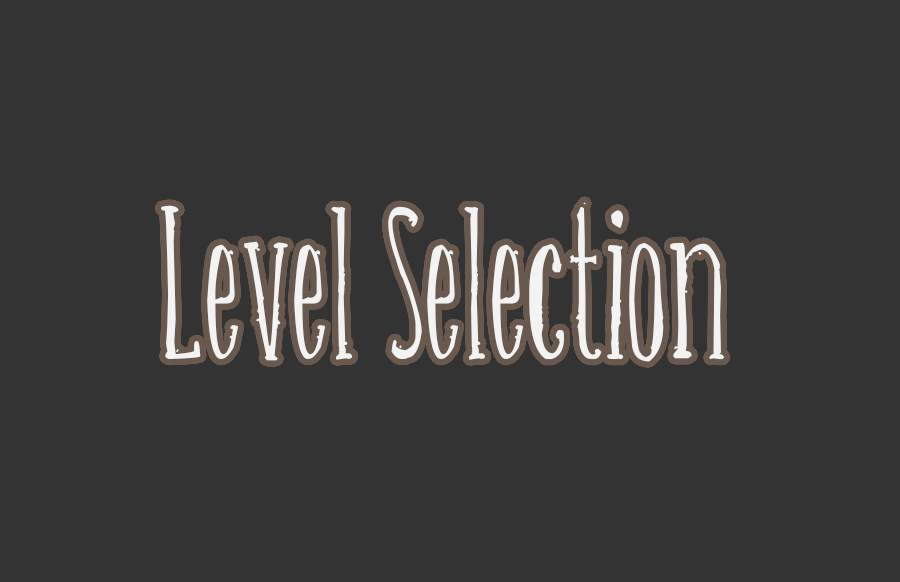
<style>
.page{position:relative;width:900px;height:582px;background:#333333}
.page>*{position:absolute;margin:0}
.t1{font:166.7px "Belisaplumillamanual";color:#f3f3f3}
</style>
<div class="page">
<p class="t1" style="left:161px;top:202px;width:564px;height:160px">Level Selection</p>
</div>
